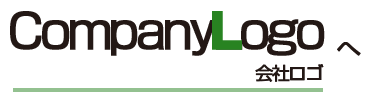
<style>
.page{position:relative;width:382px;height:100px;background:#ffffff}
.page>*{position:absolute;margin:0}
.t1{font:48px "ShinGoPro-Regular";letter-spacing:-0.1em;color:#231815;font-weight:bold}
.t2{font:48px "ShinGoPro-Ultra";letter-spacing:-0.1em;color:#288321;font-weight:bold}
.t3{font:24px "ShinGoPro-Regular";letter-spacing:-0.1em;color:#231815;font-weight:bold}
.t4{font:18px "ShinGoPro-Regular";letter-spacing:-0.1em;color:#231815;font-weight:bold}
</style>
<div class="page">
<p class="t1" style="left:10px;top:11px;width:315px;height:45px">CompanyLogo</p>
<p class="t2" style="left:212px;top:11px;width:30px;height:39px">L</p>
<p class="t3" style="left:337px;top:42px;width:24px;height:14px">へ</p>
<p class="t4" style="left:255px;top:64px;width:69px;height:18px">会社ロゴ</p>
</div>
